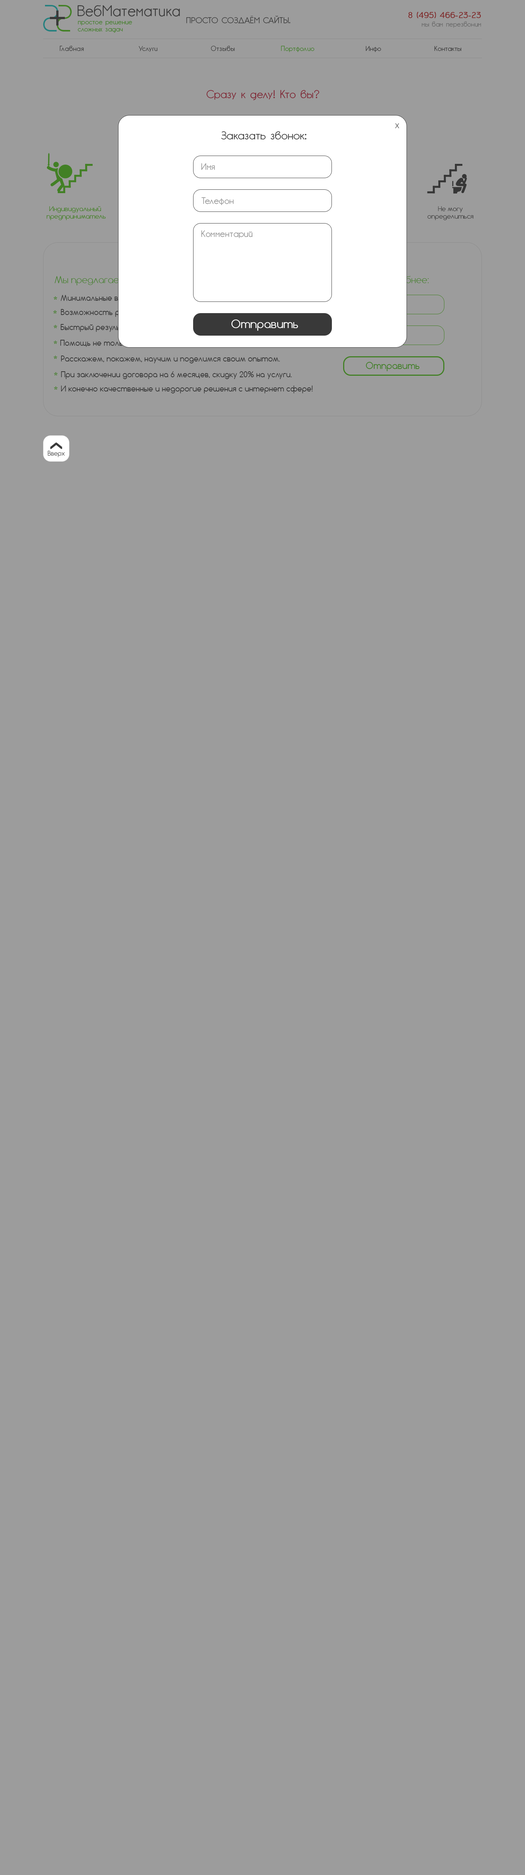
<style>
.page{position:relative;width:525px;height:1875px;background:#9c9c9c}
.page>*{position:absolute;margin:0}
.t1{font:14.9px "GardensC";color:#3d3d3d}
.t2{font:8.2px "GardensC";color:#393939;text-transform:uppercase}
.t3{font:8.2px "GardensC";color:#802525;font-weight:bold}
.t4{font:6.8px/7px "GardensC";color:#428025}
.t5{font:6.7px "GardensC";color:#696969}
.t6{font:6.8px "GardensC";letter-spacing:0.03em;color:#393939}
.t7{font:6.8px "GardensC";letter-spacing:0.01em;color:#428025}
.t8{font:6.8px "GardensC";color:#393939}
.t9{font:11.2px "GardensC";color:#802534}
.t10{font:11.2px "GardensC";color:#393939}
.t11{font:9px "GardensC";color:#9a9a9a}
.t12{font:9px "GardensC";color:#999999}
.t13{font:6.4px "Comfortaa-Light";color:#428025}
.t14{font:6.4px "Comfortaa-Light";color:#333333}
.t15{font:9px "Comfortaa-Light";color:#428025}
.t16{font:11.2px "Comfortaa";color:#428025}
.t17{font:7.5px "Comfortaa";color:#333333}
.t18{font:11.2px "Comfortaa";color:#ffffff}
.t19{font:9px "Comfortaa";color:#428025}
.t20{font:22.1px "Comfortaa-Light";letter-spacing:-0.025em;color:#393939;scale:0.48 1}
.t21{font:6px "Comfortaa-Light";color:#393939}
</style>
<div class="page">
<p class="t1" style="left:78px;top:5px;width:102px;height:11px">ВебМатематика</p>
<p class="t2" style="left:186px;top:15px;width:104px;height:9px">Просто создаём сайты.</p>
<p class="t3" style="left:408px;top:12px;width:73px;height:6px">8 (495) 466-23-23</p>
<p class="t4" style="left:78px;top:21px;width:54px;height:12px">простое решение <br>сложных задач</p>
<p class="t5" style="left:422px;top:21px;width:59px;height:7px">мы вам перезвоним</p>
<p class="t6" style="left:60px;top:46px;width:24px;height:5px">Главная</p>
<p class="t6" style="left:139px;top:46px;width:19px;height:6px">Услуги</p>
<p class="t6" style="left:211px;top:46px;width:24px;height:5px">Отзывы</p>
<p class="t7" style="left:281px;top:46px;width:33px;height:6px">Портфолио</p>
<p class="t8" style="left:366px;top:46px;width:15px;height:6px">Инфо</p>
<p class="t8" style="left:434px;top:46px;width:27px;height:5px">Контакты</p>
<p class="t9" style="left:206px;top:90px;width:114px;height:10px">Сразу к делу! Кто вы?</p>
<p class="t8" style="left:395px;top:123px;width:4px;height:6px">Х</p>
<p class="t10" style="left:221px;top:131px;width:85px;height:9px">Заказать звонок:</p>
<p class="t11" style="left:201px;top:163px;width:14px;height:7px">Имя</p>
<p class="t12" style="left:201px;top:197px;width:33px;height:8px">Телефон</p>
<p class="t13" style="left:46px;top:206px;width:60px;height:14px;text-align:center">Индивидуальный <br>предприниматель</p>
<p class="t14" style="left:428px;top:206px;width:45px;height:14px;text-align:center">Не могу<br>определиться</p>
<p class="t12" style="left:201px;top:230px;width:51px;height:8px">Комментарий</p>
<p class="t15" style="left:55px;top:276px;width:73px;height:9px">Мы предлагаем:</p>
<p class="t16" style="left:54px;top:296px;width:3px;height:4px">*</p>
<p class="t16" style="left:53px;top:310px;width:4px;height:4px">*</p>
<p class="t16" style="left:54px;top:325px;width:3px;height:3px">*</p>
<p class="t17" style="left:60px;top:324px;width:79px;height:8px">Быстрый результат.</p>
<p class="t18" style="left:231px;top:320px;width:67px;height:11px">Отправить</p>
<p class="t16" style="left:54px;top:340px;width:3px;height:4px">*</p>
<p class="t16" style="left:54px;top:356px;width:3px;height:3px">*</p>
<p class="t17" style="left:61px;top:356px;width:219px;height:7px">Расскажем, покажем, научим и поделимся своим опытом.</p>
<p class="t19" style="left:366px;top:362px;width:54px;height:9px">Отправить</p>
<p class="t16" style="left:54px;top:372px;width:4px;height:3px">*</p>
<p class="t17" style="left:61px;top:371px;width:231px;height:8px">При заключении договора на 6 месяцев, скидку 20% на услуги.</p>
<p class="t16" style="left:54px;top:386px;width:4px;height:4px">*</p>
<p class="t17" style="left:61px;top:386px;width:252px;height:7px">И конечно качественные и недорогие решения с интернет сфере!</p>
<p class="t20" style="left:50px;top:442px;width:12px;height:6px;rotate:90deg">&lt;</p>
<p class="t20" style="left:50px;top:443px;width:12px;height:5px;rotate:90deg">&lt;</p>
<p class="t20" style="left:50px;top:444px;width:12px;height:5px;rotate:90deg">&lt;</p>
<p class="t21" style="left:48px;top:451px;width:17px;height:6px">Вверх</p>
</div>
